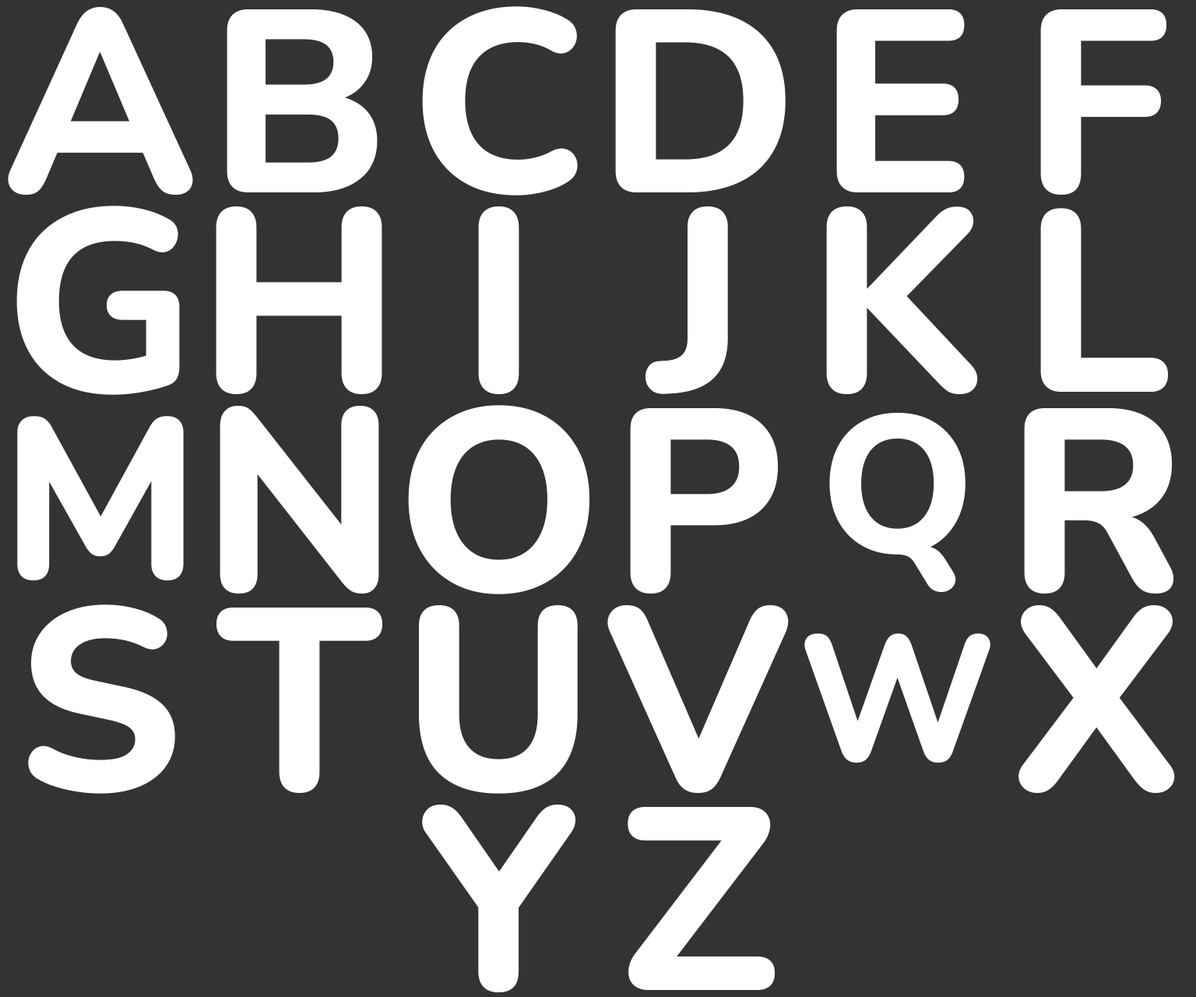
<style>
.page{position:relative;width:1196px;height:997px;background:#333333}
.page>*{position:absolute;margin:0}
.t1{font:259.6px "Nunito-ExtraBold";letter-spacing:-0.06em;color:#ffffff}
.t2{font:194.7px "Nunito-ExtraBold";letter-spacing:-0.06em;color:#ffffff}
.t3{font:227.1px "Nunito-ExtraBold";letter-spacing:-0.06em;color:#ffffff}
.t4{font:178.5px "Nunito-ExtraBold";letter-spacing:-0.06em;color:#ffffff}
</style>
<div class="page">
<p class="t1" style="left:8px;top:7px;width:185px;height:188px">A</p>
<p class="t1" style="left:227px;top:9px;width:151px;height:183px">B</p>
<p class="t1" style="left:422px;top:6px;width:156px;height:189px">C</p>
<p class="t1" style="left:615px;top:9px;width:171px;height:183px">D</p>
<p class="t1" style="left:836px;top:9px;width:129px;height:183px">E</p>
<p class="t1" style="left:1040px;top:9px;width:127px;height:186px">F</p>
<p class="t1" style="left:16px;top:206px;width:164px;height:189px">G</p>
<p class="t1" style="left:216px;top:206px;width:166px;height:188px">H</p>
<p class="t1" style="left:478px;top:206px;width:41px;height:188px">I</p>
<p class="t1" style="left:646px;top:206px;width:82px;height:188px">J</p>
<p class="t1" style="left:826px;top:206px;width:152px;height:188px">K</p>
<p class="t1" style="left:1040px;top:208px;width:128px;height:184px">L</p>
<p class="t1" style="left:220px;top:406px;width:159px;height:187px">N</p>
<p class="t1" style="left:408px;top:405px;width:182px;height:189px">O</p>
<p class="t1" style="left:630px;top:408px;width:148px;height:185px">P</p>
<p class="t2" style="left:829px;top:413px;width:137px;height:180px">Q</p>
<p class="t1" style="left:1024px;top:408px;width:150px;height:185px">R</p>
<p class="t3" style="left:17px;top:416px;width:167px;height:165px">M</p>
<p class="t1" style="left:28px;top:604px;width:147px;height:190px">S</p>
<p class="t1" style="left:419px;top:605px;width:159px;height:189px">U</p>
<p class="t1" style="left:607px;top:605px;width:182px;height:188px">V</p>
<p class="t1" style="left:1019px;top:605px;width:156px;height:188px">X</p>
<p class="t1" style="left:217px;top:607px;width:165px;height:186px">T</p>
<p class="t4" style="left:804px;top:633px;width:187px;height:130px">W</p>
<p class="t1" style="left:422px;top:804px;width:154px;height:188px">Y</p>
<p class="t1" style="left:628px;top:807px;width:147px;height:183px">Z</p>
</div>
